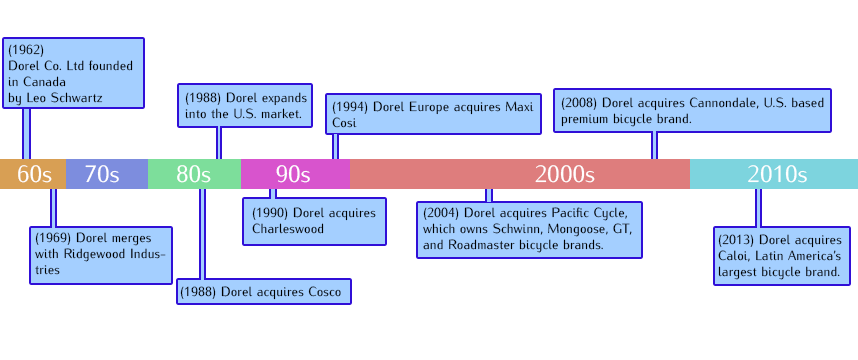
<style>
.page{position:relative;width:858px;height:360px;background:#ffffff}
.page>*{position:absolute;margin:0}
.t1{font:13.3px "Iwona-Regular";color:#000000}
.t2{font:24px "Iwona-Regular";color:#ffffff}
</style>
<div class="page">
<p class="t1" style="left:8px;top:44px;width:125px;height:62px">(1962)<br>Dorel Co. Ltd founded<br>in Canada <br>by Leo Schwartz</p>
<p class="t1" style="left:185px;top:92px;width:122px;height:27px">(1988) Dorel expands into the U.S. market.</p>
<p class="t1" style="left:332px;top:101px;width:202px;height:27px">(1994) Dorel Europe acquires Maxi Cosi</p>
<p class="t1" style="left:561px;top:97px;width:263px;height:30px">(2008) Dorel acquires Cannondale, U.S. based <br>premium bicycle brand.</p>
<p class="t2" style="left:18px;top:165px;width:789px;height:18px">60s    70s       80s        90s                            2000s                   2010s</p>
<p class="t1" style="left:252px;top:207px;width:124px;height:27px">(1990) Dorel acquires <br>Charleswood</p>
<p class="t1" style="left:423px;top:207px;width:209px;height:46px">(2004) Dorel acquires Pacific Cycle, which owns Schwinn, Mongoose, GT, and Roadmaster bicycle brands.</p>
<p class="t1" style="left:35px;top:232px;width:131px;height:43px">(1969) Dorel merges with Ridgewood Industries</p>
<p class="t1" style="left:718px;top:234px;width:124px;height:46px">(2013) Dorel acquires Caloi, Latin America’s largest bicycle brand.</p>
<p class="t1" style="left:180px;top:286px;width:161px;height:14px">(1988) Dorel acquires Cosco</p>
</div>
